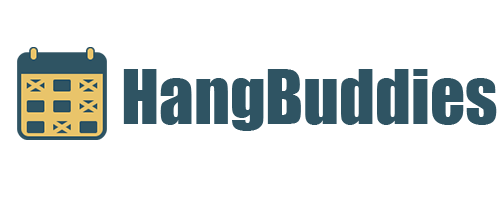
<style>
.page{position:relative;width:500px;height:200px;background:#ffffff}
.page>*{position:absolute;margin:0}
.t1{font:68.7px "Impact";color:#2f5463}
</style>
<div class="page">
<p class="t1" style="left:123px;top:69px;width:374px;height:62px">HangBuddies</p>
</div>
